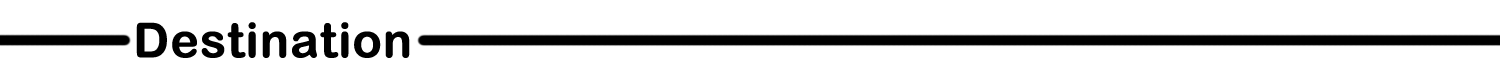
<style>
.page{position:relative;width:1500px;height:81px;background:#ffffff}
.page>*{position:absolute;margin:0}
.t1{font:48px "ArialRoundedMTBold";color:#000000;font-weight:bold}
</style>
<div class="page">
<p class="t1" style="left:136px;top:22px;width:274px;height:36px">Destination</p>
</div>
